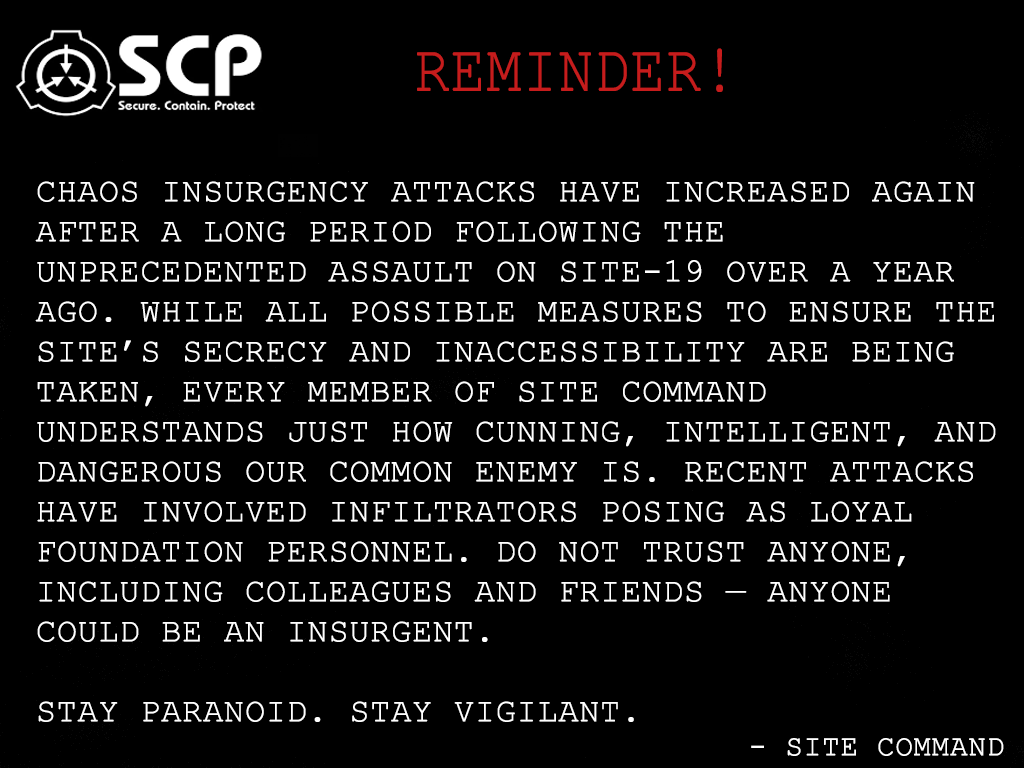
<style>
.page{position:relative;width:1024px;height:768px;background:#000000}
.page>*{position:absolute;margin:0}
.t1{font:66.7px "CourierNewPSMT";color:#c61c1c;text-transform:uppercase;font-weight:bold;scale:0.86 1}
.t2{font:33.3px "CourierNewPSMT";color:#ffffff;text-transform:uppercase;font-weight:bold}
.t3{font:29.2px "CourierNewPSMT";color:#ffffff;text-transform:uppercase;font-weight:bold}
</style>
<div class="page">
<p class="t1" style="left:417px;top:48px;width:306px;height:44px">Reminder!</p>
<p class="t2" style="left:35px;top:181px;width:961px;height:541px;text-align:justify"><span class="t3"><br></span>Chaos Insurgency attacks have increased again after a long period following the unprecedented assault on Site-19 over a year ago. While all possible measures to ensure the site’s secrecy and inaccessibility are being taken, every member of Site Command understands just how cunning, intelligent, and dangerous our common enemy is. Recent attacks have involved infiltrators posing as loyal Foundation personnel. Do not trust anyone, including colleagues and friends — anyone could be an insurgent.<br><br>Stay paranoid. Stay vigilant.</p>
<p class="t3" style="left:751px;top:738px;width:253px;height:18px">- Site command</p>
</div>
